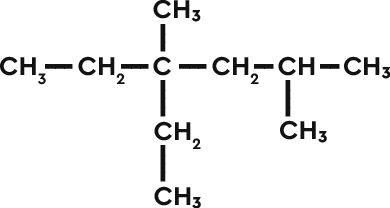
<style>
.page{position:relative;width:390px;height:208px;background:#ffffff}
.page>*{position:absolute;margin:0}
.t1{font:27px "CeraPro-Bold";color:#121212}
.t2{font:42.6px "CeraPro-Bold";color:#121212}
</style>
<div class="page">
<p class="t1" style="left:153px;top:0px;width:48px;height:22px">CH3</p>
<p class="t2" style="left:160px;top:24px;width:6px;height:28px;rotate:90deg">---</p>
<p class="t1" style="left:0px;top:56px;width:46px;height:29px">CH3</p>
<p class="t2" style="left:45px;top:64px;width:28px;height:5px">---</p>
<p class="t1" style="left:78px;top:56px;width:47px;height:28px">CH2</p>
<p class="t2" style="left:121px;top:64px;width:28px;height:5px">---</p>
<p class="t1" style="left:153px;top:56px;width:18px;height:20px">C</p>
<p class="t2" style="left:179px;top:64px;width:28px;height:5px">---</p>
<p class="t1" style="left:212px;top:56px;width:47px;height:28px">CH2</p>
<p class="t2" style="left:254px;top:64px;width:20px;height:5px">--</p>
<p class="t1" style="left:278px;top:56px;width:37px;height:20px">CH</p>
<p class="t2" style="left:320px;top:64px;width:20px;height:5px">--</p>
<p class="t1" style="left:344px;top:56px;width:47px;height:23px">CH3</p>
<p class="t2" style="left:160px;top:80px;width:6px;height:37px;rotate:90deg">----</p>
<p class="t2" style="left:285px;top:80px;width:6px;height:37px;rotate:90deg">----</p>
<p class="t1" style="left:154px;top:121px;width:47px;height:28px">CH2</p>
<p class="t1" style="left:280px;top:120px;width:47px;height:23px">CH3</p>
<p class="t2" style="left:160px;top:145px;width:6px;height:37px;rotate:90deg">----</p>
<p class="t1" style="left:154px;top:186px;width:47px;height:23px">CH3</p>
</div>
